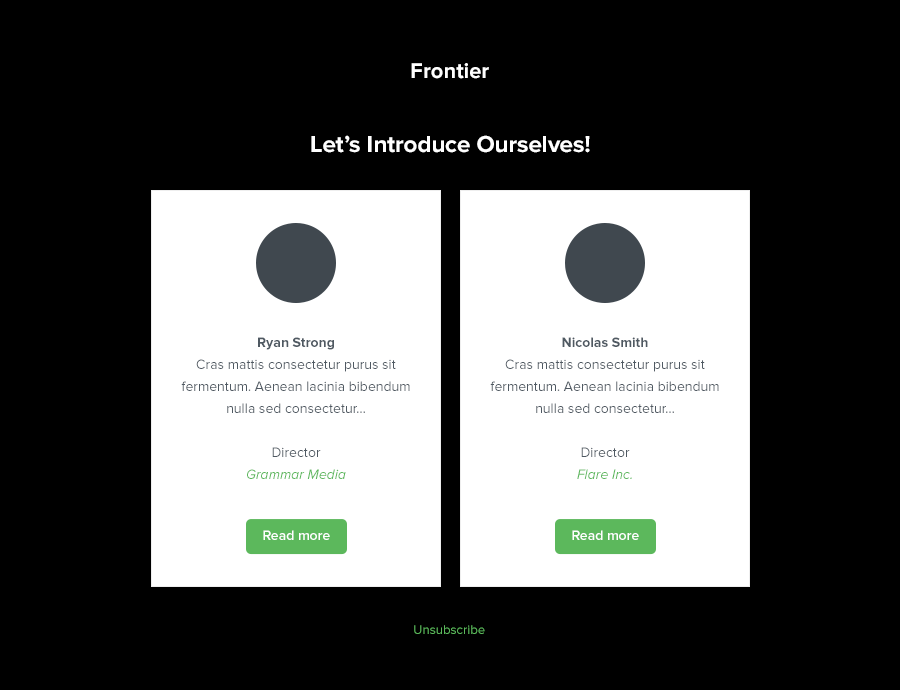
<style>
.page{position:relative;width:900px;height:690px;background:#000000}
.page>*{position:absolute;margin:0}
.t1{font:22px "ProximaNova-Bold";color:#ffffff}
.t2{font:24px "ProximaNova-Bold";color:#ffffff}
.t3{font:14px/22px "ProximaNova-Regular";color:#4f5962}
.t4{font:14px/22px "ProximaNova-Bold";color:#4f5962}
.t5{font:14px/22px "ProximaNova-RegularIt";color:#5cb85c}
.t6{font:14px "ProximaNova-Semibold";color:#ffffff}
.t7{font:13.1px "ProximaNova-Regular";color:#5cb85c}
</style>
<div class="page">
<p class="t1" style="left:411px;top:63px;width:78px;height:16px">Frontier</p>
<p class="t2" style="left:311px;top:135px;width:279px;height:18px">Let’s Introduce Ourselves!</p>
<p class="t3" style="left:181px;top:337px;width:229px;height:142px;text-align:center"><span class="t4">Ryan Strong<br></span>Cras mattis consectetur purus sit fermentum. Aenean lacinia bibendum nulla sed consectetur...<br><br>Director<br><span class="t5">Grammar Media</span></p>
<p class="t3" style="left:490px;top:337px;width:229px;height:142px;text-align:center"><span class="t4">Nicolas Smith<br></span>Cras mattis consectetur purus sit fermentum. Aenean lacinia bibendum nulla sed consectetur...<br><br>Director<br><span class="t5">Flare Inc.</span></p>
<p class="t6" style="left:263px;top:530px;width:67px;height:10px">Read more</p>
<p class="t6" style="left:572px;top:530px;width:67px;height:10px">Read more</p>
<p class="t7" style="left:414px;top:625px;width:71px;height:9px">Unsubscribe</p>
</div>
